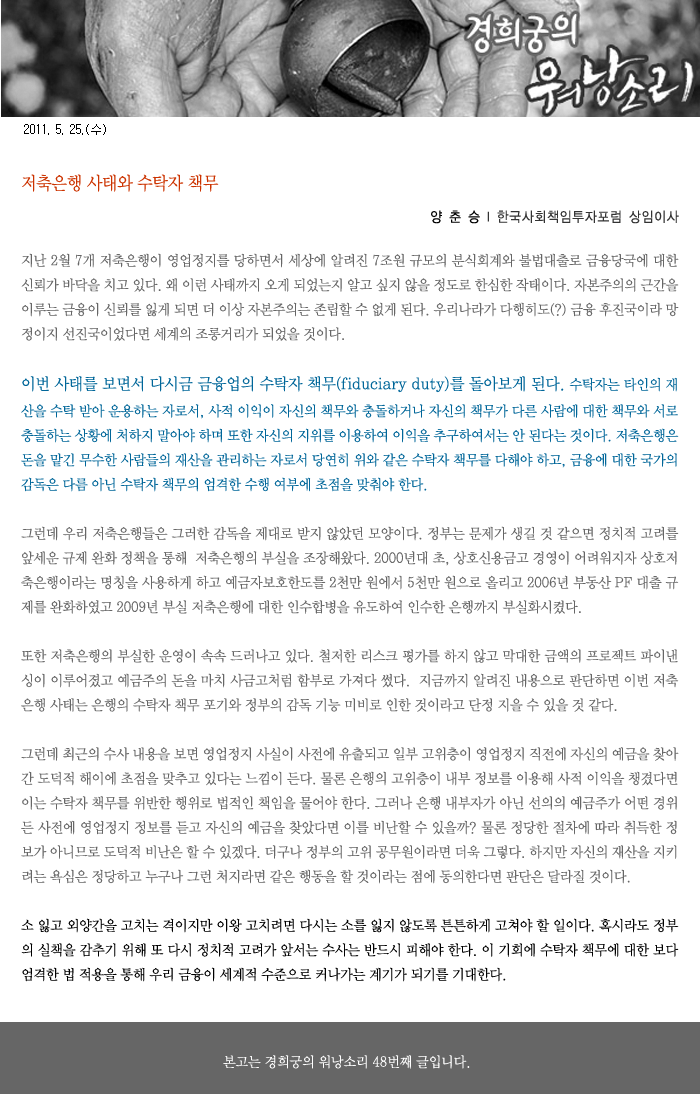
<style>
.page{position:relative;width:700px;height:1094px;background:#ffffff}
.page>*{position:absolute;margin:0}
.t1{font:12px "Gulim";color:#000000}
.t2{font:18px "YDIWebBatan";color:#cc3300;scale:0.9 1}
.t3{font:14px "YDIYGO120-KSCpc-EUC-H";color:#333333;scale:0.9 1}
.t4{font:14px "YDIYGO120-KSCpc-EUC-H";color:#000000;scale:0.9 1}
.t5{font:14px "YDIWebBatan";color:#666666;scale:0.95 1}
.t6{font:16px "YDIWebBatan";color:#006699;scale:0.95 1}
.t7{font:14px "YDIWebBatan";color:#006699;scale:0.95 1}
.t8{font:14px "YDIWebBatan";color:#000000;scale:0.95 1}
.t9{font:14px "YDIWebBatan";color:#ffffff;scale:0.95 1}
</style>
<div class="page">
<p class="t1" style="left:24px;top:124px;width:82px;height:11px">2011. 5. 25.(수)</p>
<p class="t2" style="left:22px;top:174px;width:197px;height:18px">저축은행 사태와 수탁자 책무</p>
<p class="t3" style="left:431px;top:210px;width:248px;height:14px"><span class="t4">양 춘 승 </span>l 한국사회책임투자포럼 상임이사</p>
<p class="t5" style="left:21px;top:253px;width:658px;height:729px;text-align:justify">지난 2월 7개 저축은행이 영업정지를 당하면서 세상에 알려진 7조원 규모의 분식회계와 불법대출로 금융당국에 대한 신뢰가 바닥을 치고 있다. 왜 이런 사태까지 오게 되었는지 알고 싶지 않을 정도로 한심한 작태이다. 자본주의의 근간을 이루는 금융이 신뢰를 잃게 되면 더 이상 자본주의는 존립할 수 없게 된다. 우리나라가 다행히도(?) 금융 후진국이라 망정이지 선진국이었다면 세계의 조롱거리가 되었을 것이다.<br><br><span class="t6">이번 사태를 보면서 다시금 금융업의 수탁자 책무(fiduciary duty)를 돌아보게 된다. </span><span class="t7">수탁자는 타인의 재산을 수탁 받아 운용하는 자로서, 사적 이익이 자신의 책무와 충돌하거나 자신의 책무가 다른 사람에 대한 책무와 서로 충돌하는 상황에 처하지 말아야 하며 또한 자신의 지위를 이용하여 이익을 추구하여서는 안 된다는 것이다. 저축은행은 돈을 맡긴 무수한 사람들의 재산을 관리하는 자로서 당연히 위와 같은 수탁자 책무를 다해야 하고, 금융에 대한 국가의 감독은 다름 아닌 수탁자 책무의 엄격한 수행 여부에 초점을 맞춰야 한다.<br></span><br>그런데 우리 저축은행들은 그러한 감독을 제대로 받지 않았던 모양이다. 정부는 문제가 생길 것 같으면 정치적 고려를 앞세운 규제 완화 정책을 통해  저축은행의 부실을 조장해왔다. 2000년대 초, 상호신용금고 경영이 어려워지자 상호저축은행이라는 명칭을 사용하게 하고 예금자보호한도를 2천만 원에서 5천만 원으로 올리고 2006년 부동산 PF 대출 규제를 완화하였고 2009년 부실 저축은행에 대한 인수합병을 유도하여 인수한 은행까지 부실화시켰다.<br><br>또한 저축은행의 부실한 운영이 속속 드러나고 있다. 철저한 리스크 평가를 하지 않고 막대한 금액의 프로젝트 파이낸싱이 이루어졌고 예금주의 돈을 마치 사금고처럼 함부로 가져다 썼다.  지금까지 알려진 내용으로 판단하면 이번 저축은행 사태는 은행의 수탁자 책무 포기와 정부의 감독 기능 미비로 인한 것이라고 단정 지을 수 있을 것 같다. <br><br>그런데 최근의 수사 내용을 보면 영업정지 사실이 사전에 유출되고 일부 고위층이 영업정지 직전에 자신의 예금을 찾아간 도덕적 해이에 초점을 맞추고 있다는 느낌이 든다. 물론 은행의 고위층이 내부 정보를 이용해 사적 이익을 챙겼다면 이는 수탁자 책무를 위반한 행위로 법적인 책임을 물어야 한다. 그러나 은행 내부자가 아닌 선의의 예금주가 어떤 경위든 사전에 영업정지 정보를 듣고 자신의 예금을 찾았다면 이를 비난할 수 있을까? 물론 정당한 절차에 따라 취득한 정보가 아니므로 도덕적 비난은 할 수 있겠다. 더구나 정부의 고위 공무원이라면 더욱 그렇다. 하지만 자신의 재산을 지키려는 욕심은 정당하고 누구나 그런 처지라면 같은 행동을 할 것이라는 점에 동의한다면 판단은 달라질 것이다.<br><br><span class="t8">소 잃고 외양간을 고치는 격이지만 이왕 고치려면 다시는 소를 잃지 않도록 튼튼하게 고쳐야 할 일이다. 혹시라도 정부의 실책을 감추기 위해 또 다시 정치적 고려가 앞서는 수사는 반드시 피해야 한다. 이 기회에 수탁자 책무에 대한 보다 엄격한 법 적용을 통해 우리 금융이 세계적 수준으로 커나가는 계기가 되기를 기대한다.</span></p>
<p class="t9" style="left:223px;top:1055px;width:247px;height:14px">본고는 경희궁의 워낭소리 48번째 글입니다.</p>
</div>
